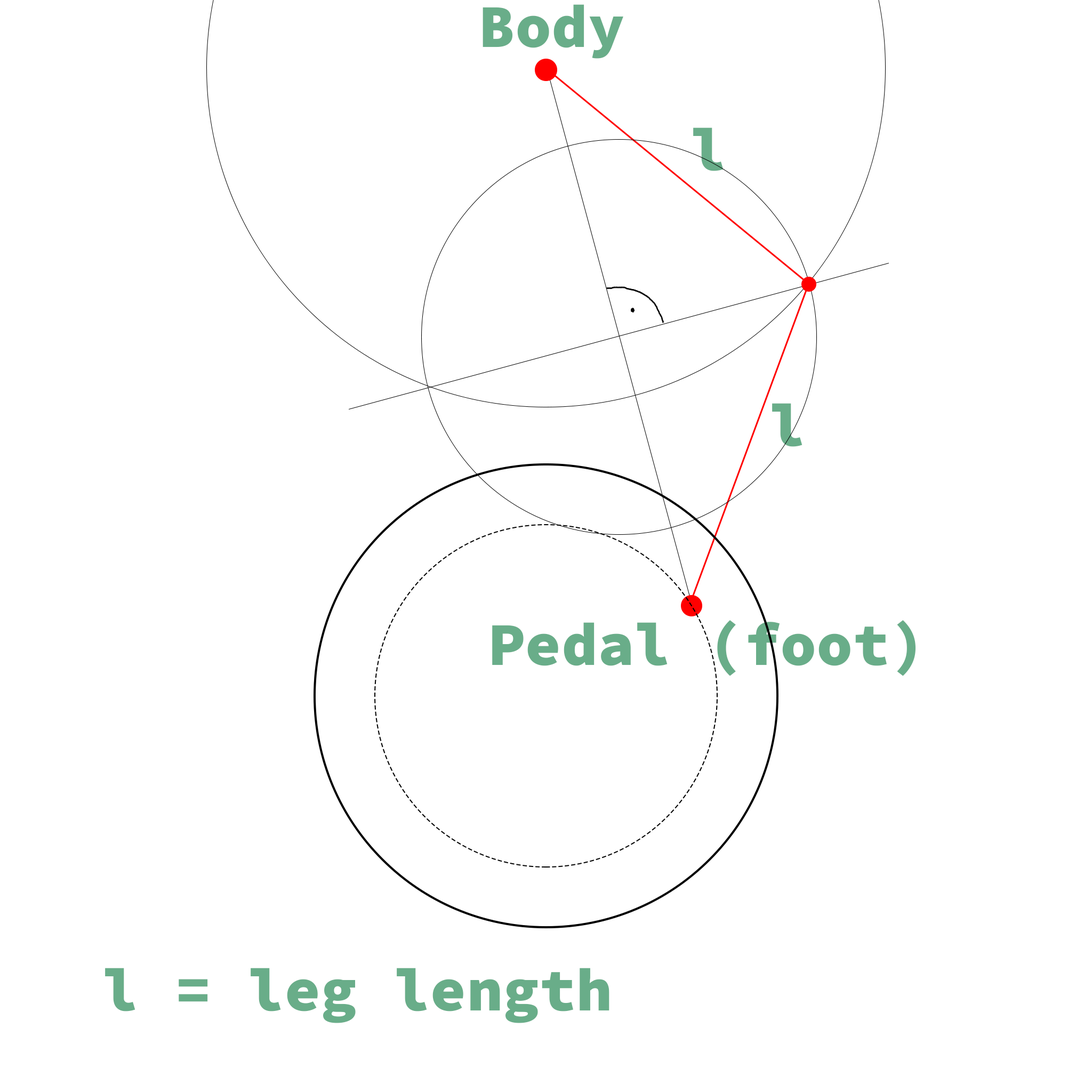
<style>
.page{position:relative;width:1092px;height:1092px;background:#ffffff}
.page>*{position:absolute;margin:0}
.t1{font:60.8px "SourceCodePro-Black";color:#69ad89}
</style>
<div class="page">
<p class="t1" style="left:483px;top:4px;width:140px;height:55px">Body</p>
<p class="t1" style="left:693px;top:127px;width:31px;height:44px">l</p>
<p class="t1" style="left:772px;top:403px;width:30px;height:44px">l</p>
<p class="t1" style="left:492px;top:620px;width:424px;height:56px">Pedal (foot)</p>
<p class="t1" style="left:105px;top:968px;width:504px;height:55px">l = leg length</p>
</div>
